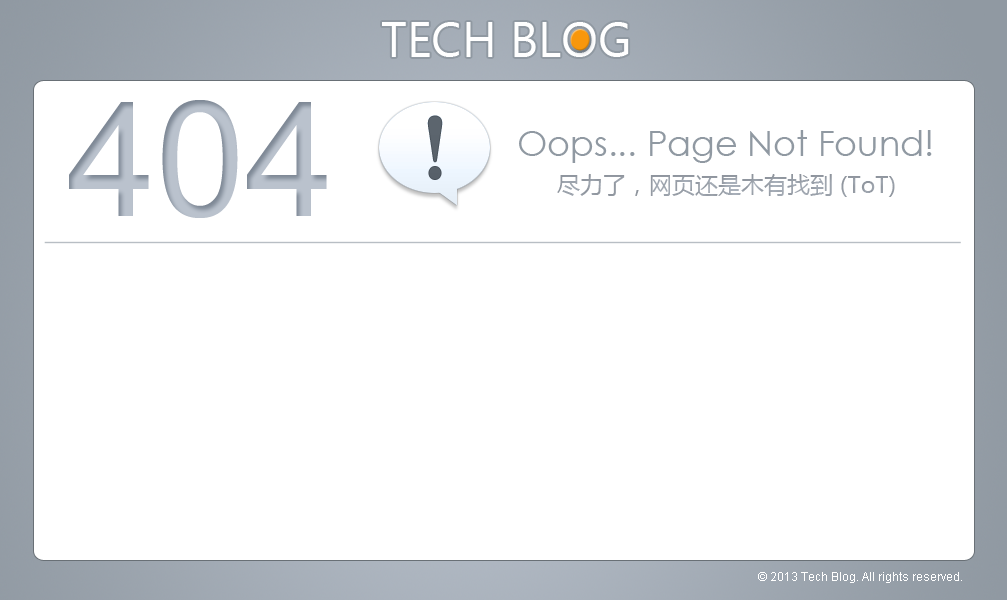
<style>
.page{position:relative;width:1007px;height:600px;background:#ffffff}
.page>*{position:absolute;margin:0}
.t1{font:49px "MicrosoftTaiLe";color:#ffffff}
.t2{font:159.9px "ArialMT";color:#bac2cd}
.t3{font:35px "CenturyGothic";color:#9099a2}
.t4{font:23px "MicrosoftYaHei";color:#989fa8}
.t5{font:12px "ArialMT";color:#ffffff}
</style>
<div class="page">
<p class="t1" style="left:382px;top:22px;width:247px;height:35px">TECH BLOG</p>
<p class="t2" style="left:69px;top:100px;width:258px;height:118px">404</p>
<p class="t3" style="left:519px;top:130px;width:413px;height:33px">Oops... Page Not Found!</p>
<p class="t4" style="left:557px;top:174px;width:338px;height:23px">尽力了，网页还是木有找到 (ToT)</p>
<p class="t5" style="left:758px;top:572px;width:204px;height:11px">© 2013 Tech Blog. All rights reserved.</p>
</div>
